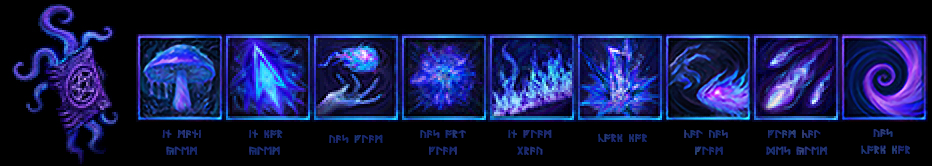
<style>
.page{position:relative;width:932px;height:166px;background:#000000}
.page>*{position:absolute;margin:0}
.t1{font:11.2px "OldeBritannian";color:#1f2e6e;scale:1.25 1}
.t2{font:11.2px "OldeBritannian";color:#1b2f6e;scale:1.25 1}
.t3{font:11.2px "OldeBritannian";color:#19296d;scale:1.25 1}
.t4{font:11.2px "OldeBritannian";color:#1c2e6e;scale:1.25 1}
.t5{font:11.2px "OldeBritannian";color:#1d2b6e;scale:1.25 1}
.t6{font:11.2px "OldeBritannian";color:#1b2d6e;scale:1.25 1}
.t7{font:11.2px "OldeBritannian";color:#1c306e;scale:1.25 1}
.t8{font:11.2px "OldeBritannian";color:#21326f;scale:1.25 1}
.t9{font:11.2px "OldeBritannian";color:#23386f;scale:1.25 1}
</style>
<div class="page">
<p class="t1" style="left:162px;top:129px;width:39px;height:26px;text-align:center">in mani<br>ylem</p>
<p class="t2" style="left:249px;top:129px;width:34px;height:26px">in por <br>ylem</p>
<p class="t3" style="left:329px;top:134px;width:54px;height:9px">vas flam</p>
<p class="t4" style="left:420px;top:129px;width:46px;height:26px;text-align:center">vas ort<br>flam</p>
<p class="t5" style="left:508px;top:129px;width:44px;height:26px;text-align:center">in flam<br>grav</p>
<p class="t6" style="left:598px;top:133px;width:49px;height:9px">corp por</p>
<p class="t7" style="left:684px;top:129px;width:44px;height:26px;text-align:center">kal vas <br>flam</p>
<p class="t8" style="left:766px;top:129px;width:62px;height:26px;text-align:center">flam kal <br>des ylem</p>
<p class="t9" style="left:861px;top:128px;width:49px;height:26px;text-align:center">vas <br>corp por</p>
</div>
